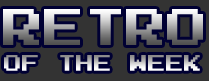
<style>
.page{position:relative;width:209px;height:81px;background:#333333}
.page>*{position:absolute;margin:0}
.t1{font:41px "PressStart2P"}
.t2{font:18px "PressStart2P"}
</style>
<div class="page">
<p class="t1" style="left:3px;top:9px;width:200px;height:36px">RETRO</p>
<p class="t2" style="left:4px;top:55px;width:196px;height:16px">OF THE WEEK</p>
</div>
